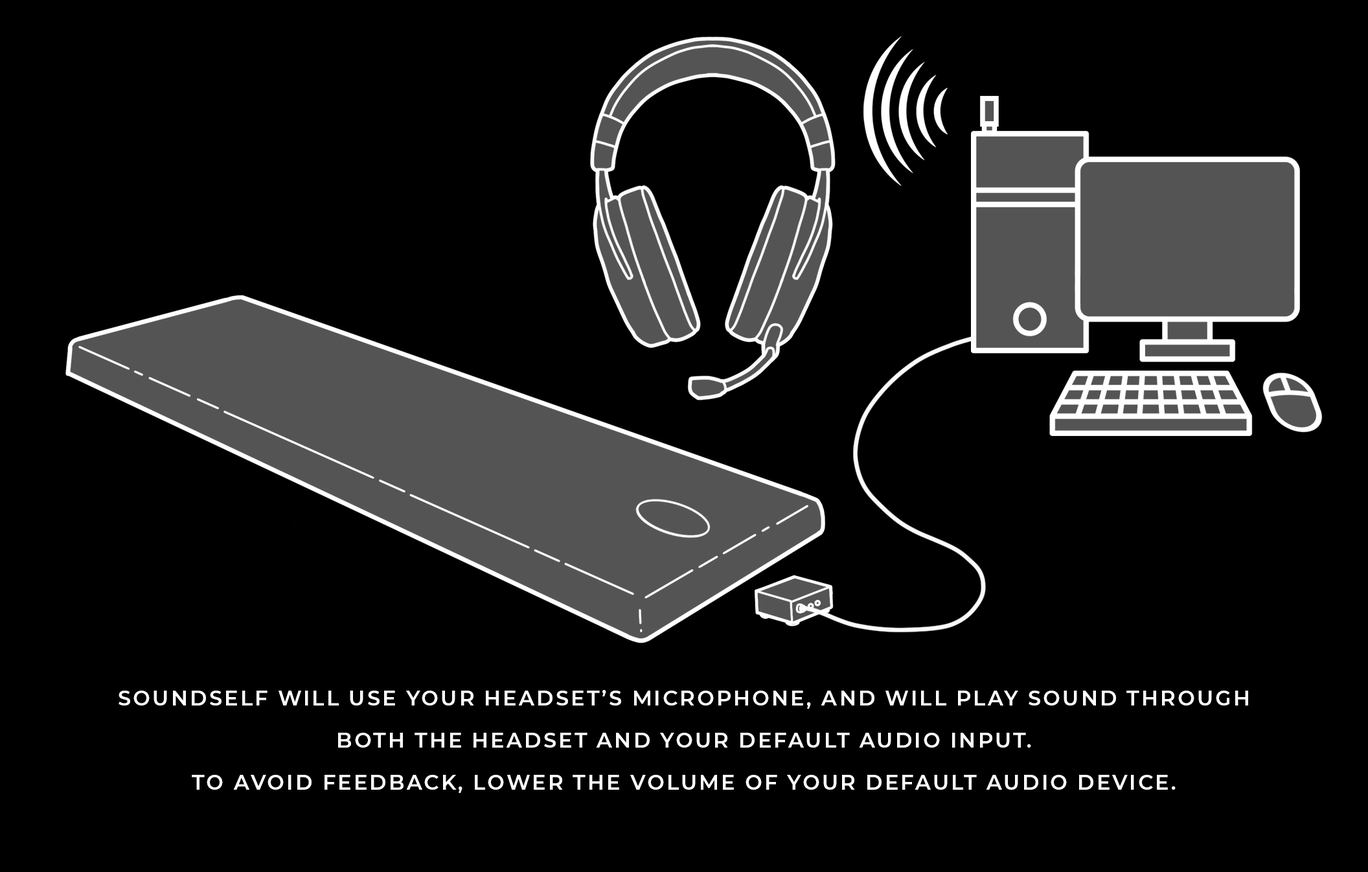
<style>
.page{position:relative;width:1368px;height:872px;background:#000000}
.page>*{position:absolute;margin:0}
.t1{font:20.7px/42.1px "Montserrat-SemiBold";letter-spacing:0.1em;color:#ffffff;text-transform:uppercase}
</style>
<div class="page">
<p class="t1" style="left:119px;top:690px;width:1129px;height:103px;text-align:center">soundself will use your headset’s microphone, and will play sound through both the headset and your default audio input. <br>To avoid feedback, lower the volume of your default audio device.</p>
</div>
